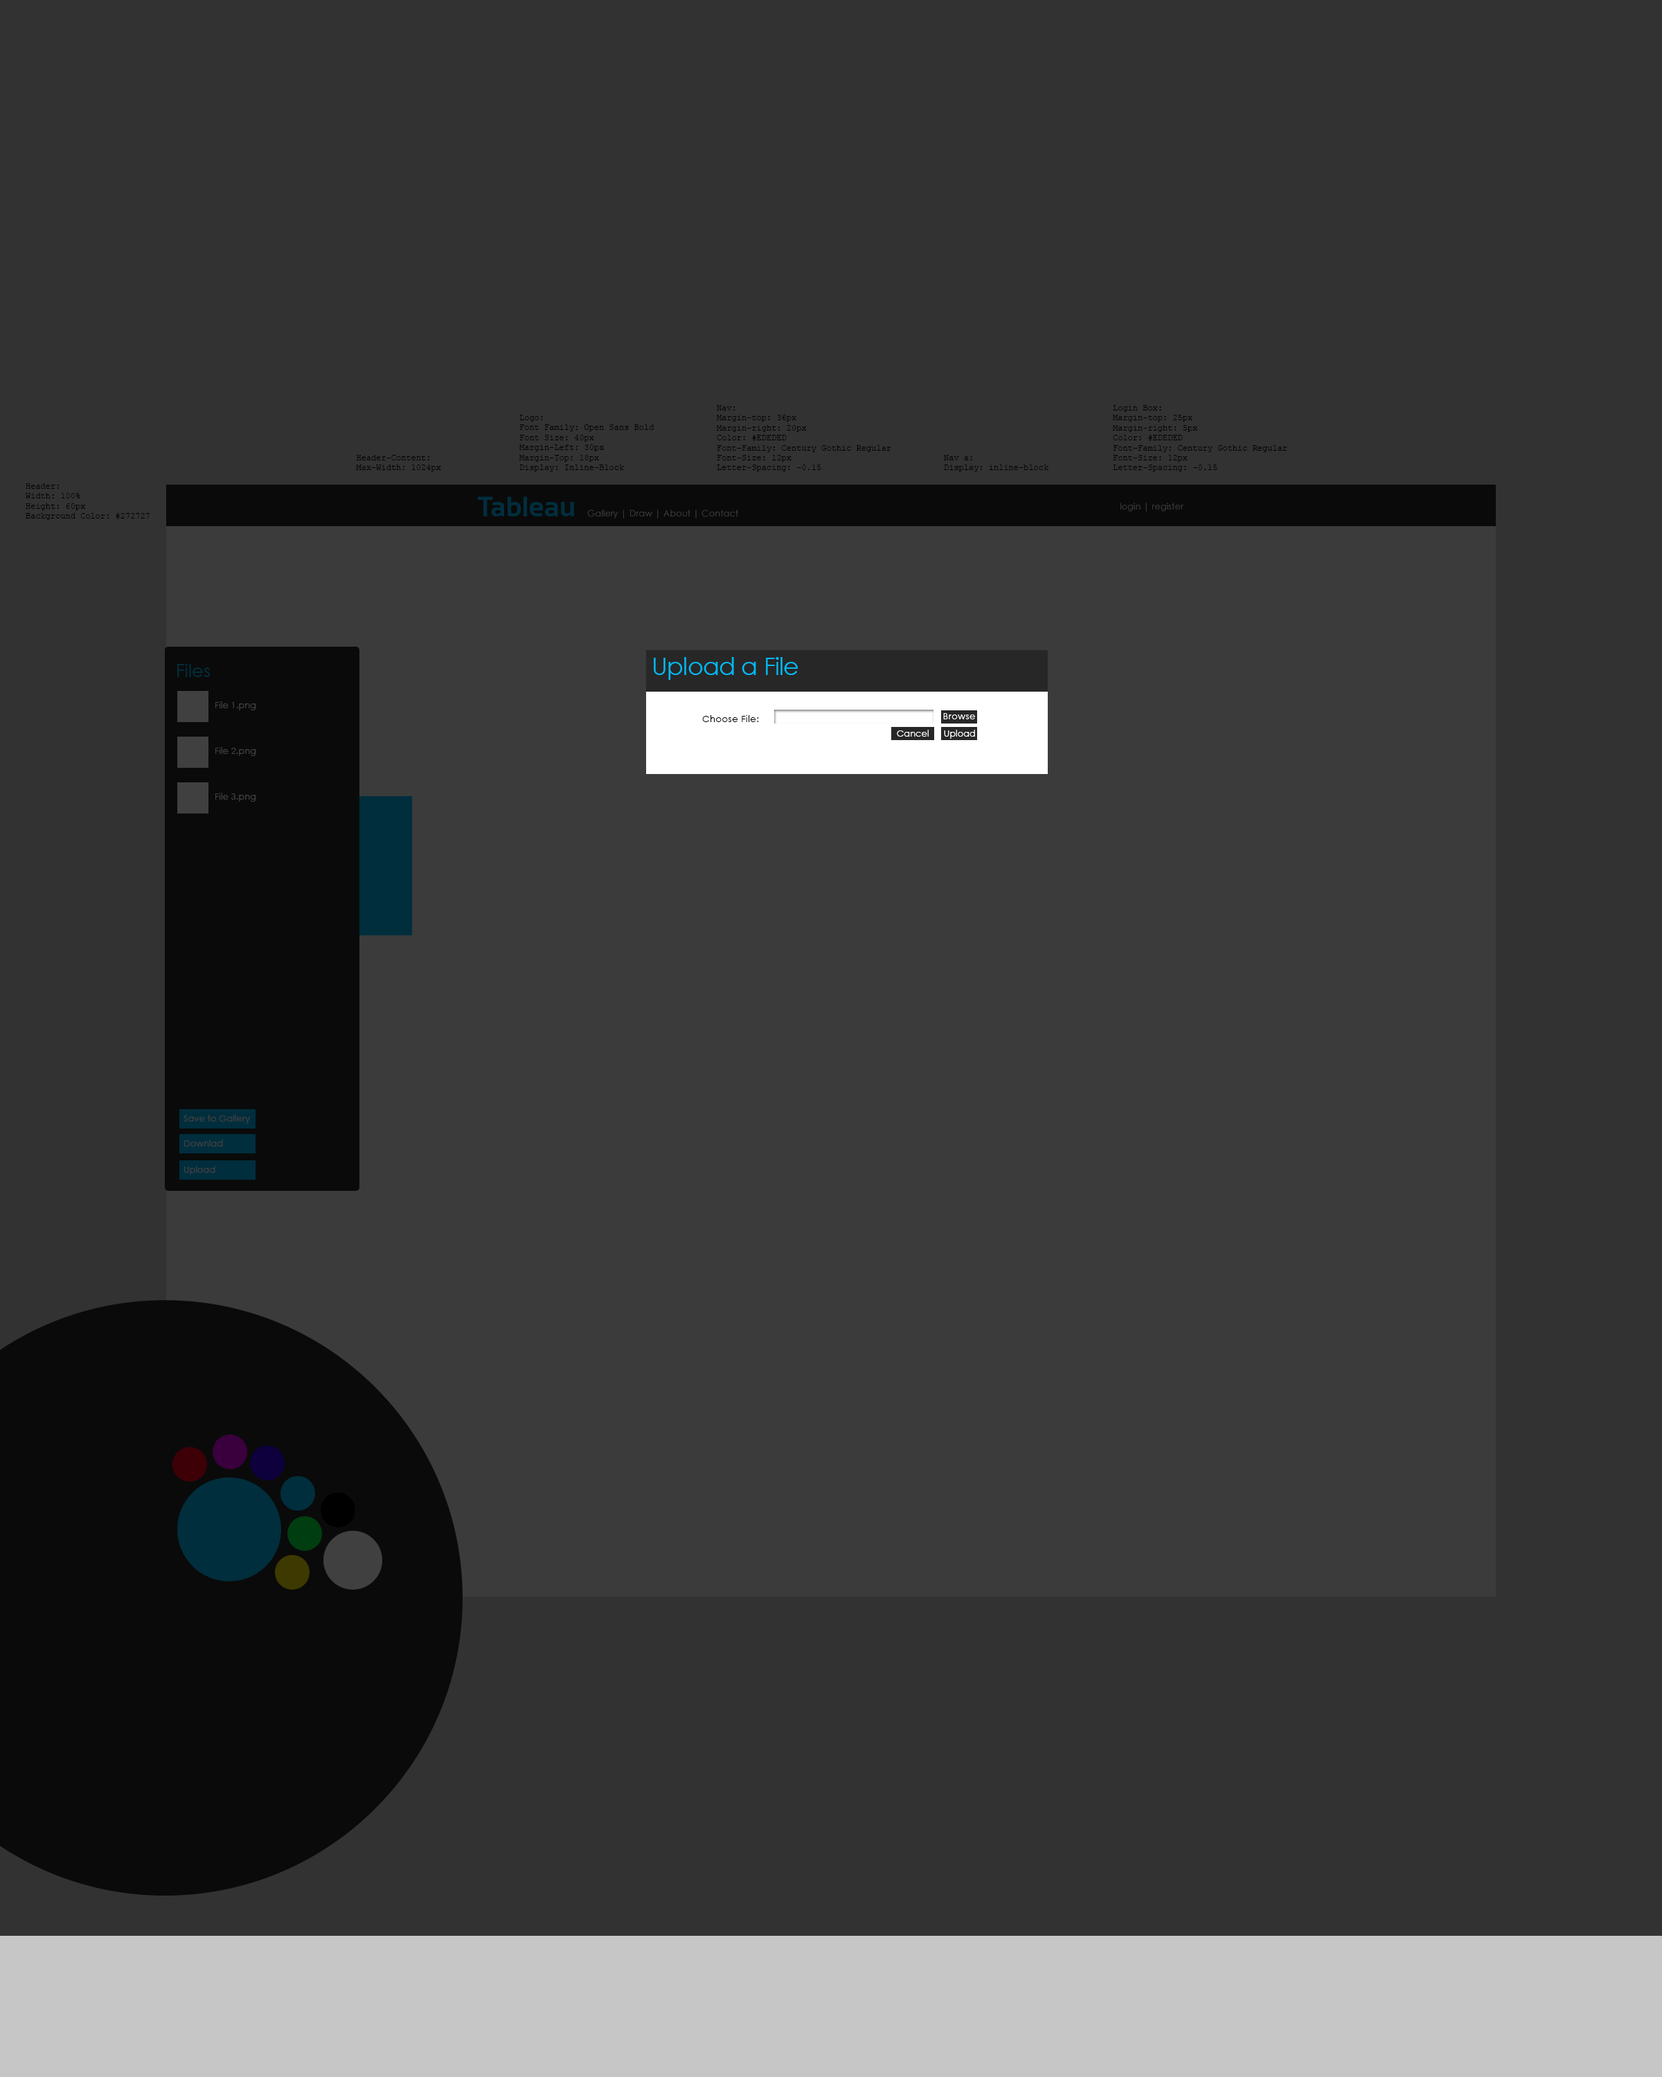
<style>
.page{position:relative;width:1662px;height:2077px;background:#323232}
.page>*{position:absolute;margin:0}
.t1{font:8.3px "CourierNewPSMT";color:#000000}
.t2{font:28px "Sansation-Bold";color:#002e3d}
.t3{font:9px "CenturyGothic";color:#3b3b3b}
.t4{font:18px "CenturyGothic";color:#002e3d}
.t5{font:24.2px "CenturyGothic";letter-spacing:-0.02em;color:#00b9f2}
.t6{font:9px "CenturyGothic";color:#404040}
.t7{font:9px "CenturyGothic";letter-spacing:0.04em;color:#ffffff}
.t8{font:9px "CenturyGothic";letter-spacing:0.04em;color:#000000}
.t9{font:9px "CenturyGothic";color:#ffffff}
</style>
<div class="page">
<p class="t1" style="left:717px;top:405px;width:174px;height:66px">Nav:<br>Margin-top: 36px<br>Margin-right: 20px<br>Color: #EDEDED<br>Font-Family: Century Gothic Regular<br>Font-Size: 12px<br>Letter-Spacing: -0.15</p>
<p class="t1" style="left:1113px;top:405px;width:174px;height:66px">Login Box:<br>Margin-top: 25px<br>Margin-right: 5px<br>Color: #EDEDED<br>Font-Family: Century Gothic Regular<br>Font-Size: 12px<br>Letter-Spacing: -0.15</p>
<p class="t1" style="left:519px;top:415px;width:135px;height:56px">Logo:<br>Font Family: Open Sans Bold<br>Font Size: 40px<br>Margin-Left: 30px<br>Margin-Top: 18px<br>Display: Inline-Block</p>
<p class="t1" style="left:356px;top:455px;width:85px;height:16px">Header-Content:<br>Max-Width: 1024px</p>
<p class="t1" style="left:944px;top:455px;width:105px;height:16px">Nav a:<br>Display: inline-block</p>
<p class="t1" style="left:26px;top:483px;width:124px;height:37px">Header:<br>Width: 100%<br>Height: 60px<br>Background Color: #272727</p>
<p class="t2" style="left:478px;top:496px;width:96px;height:20px">Tableau</p>
<p class="t3" style="left:587px;top:510px;width:151px;height:9px">Gallery | Draw | About | Contact</p>
<p class="t3" style="left:1120px;top:503px;width:64px;height:9px">login | register</p>
<p class="t4" style="left:177px;top:664px;width:33px;height:13px">Files</p>
<p class="t5" style="left:654px;top:657px;width:144px;height:23px">Upload a File</p>
<p class="t6" style="left:215px;top:701px;width:41px;height:9px">File 1.png</p>
<p class="t7" style="left:943px;top:713px;width:32px;height:6px">Browse</p>
<p class="t8" style="left:702px;top:715px;width:57px;height:7px">Choose File:</p>
<p class="t9" style="left:897px;top:730px;width:31px;height:7px">Cancel</p>
<p class="t9" style="left:944px;top:730px;width:31px;height:9px">Upload</p>
<p class="t6" style="left:215px;top:747px;width:41px;height:9px">File 2.png</p>
<p class="t6" style="left:215px;top:793px;width:41px;height:9px">File 3.png</p>
<p class="t6" style="left:183px;top:1115px;width:67px;height:9px">Save to Gallery</p>
<p class="t6" style="left:184px;top:1140px;width:39px;height:6px">Downlad</p>
<p class="t6" style="left:184px;top:1166px;width:31px;height:9px">Upload</p>
</div>
